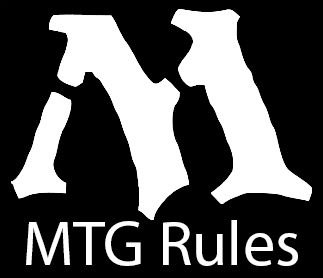
<style>
.page{position:relative;width:323px;height:278px;background:#000000}
.page>*{position:absolute;margin:0}
.t1{font:64px "MyriadHebrew-Regular";color:#ffffff}
</style>
<div class="page">
<p class="t1" style="left:26px;top:220px;width:272px;height:46px">MTG Rules</p>
</div>
